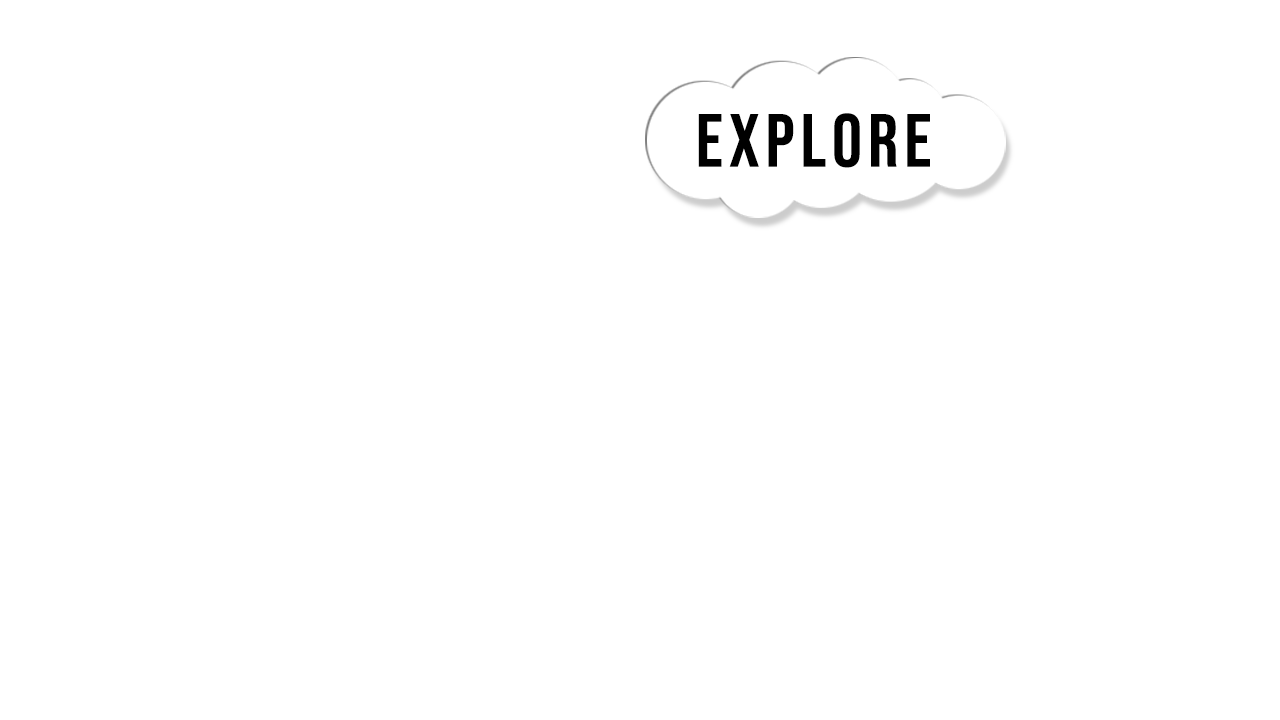
<style>
.page{position:relative;width:1280px;height:720px;background:#ffffff}
.page>*{position:absolute;margin:0}
.t1{font:75px "BebasNeue-Regular";letter-spacing:0.08em;color:#000000}
</style>
<div class="page">
<p class="t1" style="left:698px;top:113px;width:232px;height:55px">EXPLORE</p>
</div>
